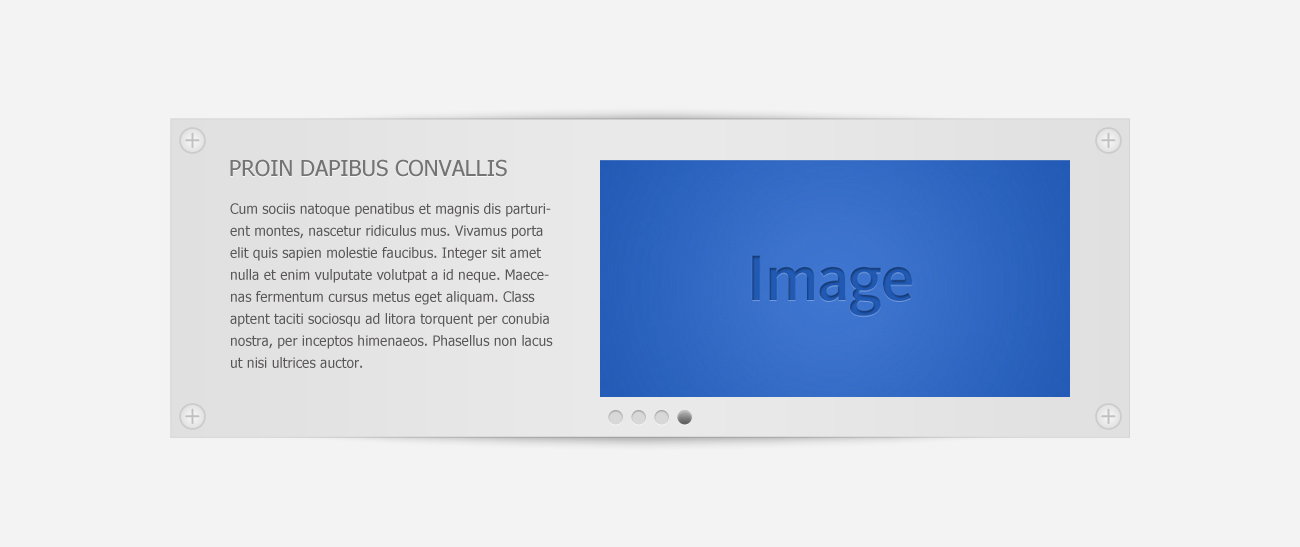
<style>
.page{position:relative;width:1300px;height:547px;background:#f3f3f3}
.page>*{position:absolute;margin:0}
.t1{font:22px "Tahoma";color:#747474;text-transform:uppercase}
.t2{font:14px/22px "Tahoma";color:#585656}
</style>
<div class="page">
<p class="t1" style="left:230px;top:159px;width:277px;height:18px">Proin dapibus convallis</p>
<p class="t2" style="left:230px;top:203px;width:323px;height:165px">Cum sociis natoque penatibus et magnis dis parturient montes, nascetur ridiculus mus. Vivamus porta elit quis sapien molestie faucibus. Integer sit amet nulla et enim vulputate volutpat a id neque. Maecenas fermentum cursus metus eget aliquam. Class aptent taciti sociosqu ad litora torquent per conubia nostra, per inceptos himenaeos. Phasellus non lacus ut nisi ultrices auctor.</p>
</div>
